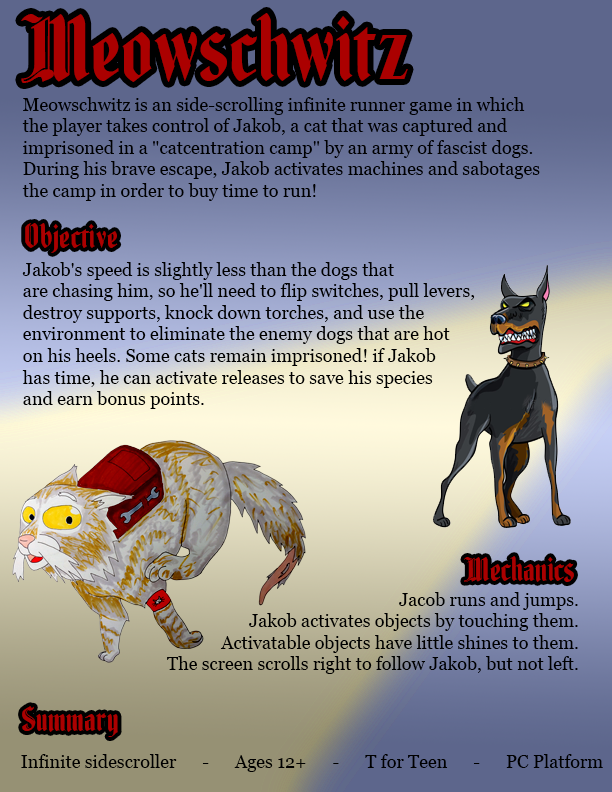
<style>
.page{position:relative;width:612px;height:792px}
.page>*{position:absolute;margin:0}
.t1{font:97.6px "FenwickWoodtype";color:#ab0000}
.t2{font:18px "Georgia";color:#000000}
.t3{font:36px "FenwickWoodtype";color:#ab0000}
</style>
<div class="page">
<p class="t1" style="left:21px;top:13px;width:387px;height:70px">Meowschwitz</p>
<p class="t2" style="left:22px;top:97px;width:518px;height:104px">Meowschwitz is an side-scrolling infinite runner game in which<br>the player takes control of Jakob, a cat that was captured and<br>imprisoned in a "catcentration camp" by an army of fascist dogs.<br>During his brave escape, Jakob activates machines and sabotages<br>the camp in order to buy time to run!</p>
<p class="t3" style="left:25px;top:223px;width:93px;height:30px">Objective</p>
<p class="t2" style="left:22px;top:262px;width:453px;height:147px">Jakob's speed is slightly less than the dogs that<br>are chasing him, so he'll need to flip switches, pull levers,<br>destroy supports, knock down torches, and use the<br>environment to eliminate the enemy dogs that are hot<br>on his heels. Some cats remain imprisoned! if Jakob<br>has time, he can activate releases to save his species<br>and earn bonus points.</p>
<p class="t3" style="left:464px;top:556px;width:110px;height:26px">Mechanics</p>
<p class="t2" style="left:167px;top:592px;width:411px;height:82px;text-align:right">Jacob runs and jumps.<br>Jakob activates objects by touching them.<br>Activatable objects have little shines to them.<br>The screen scrolls right to follow Jakob, but not left.</p>
<p class="t3" style="left:22px;top:706px;width:96px;height:31px">Summary</p>
<p class="t2" style="left:21px;top:754px;width:582px;height:18px">Infinite sidescroller      -      Ages 12+      -      T for Teen      -      PC Platform</p>
</div>
